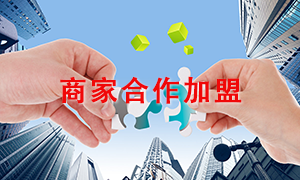
<style>
.page{position:relative;width:300px;height:180px;background:#8bbbeb}
.page>*{position:absolute;margin:0}
.t1{font:28.4px "AdobeHeitiStd-Regular";letter-spacing:0.05em;color:#f00808;font-weight:bold}
</style>
<div class="page">
<p class="t1" style="left:60px;top:76px;width:182px;height:28px">商家合作加盟</p>
</div>
